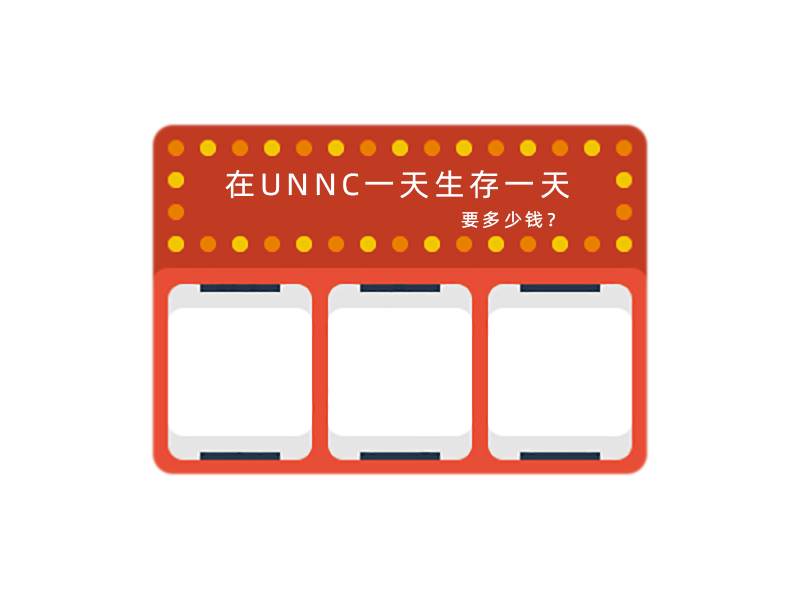
<style>
.page{position:relative;width:800px;height:600px;background:#ffffff}
.page>*{position:absolute;margin:0}
.t1{font:30.6px/30.9px "AlibabaPuHuiTi-Regular";letter-spacing:0.15em;color:#ffffff}
.t2{font:18.4px/30.9px "AlibabaPuHuiTi-Regular";letter-spacing:0.15em;color:#ffffff}
</style>
<div class="page">
<p class="t1" style="left:225px;top:170px;width:344px;height:59px;text-align:center">在UNNC一天生存一天<br>                         <span class="t2">要多少钱？</span></p>
</div>
